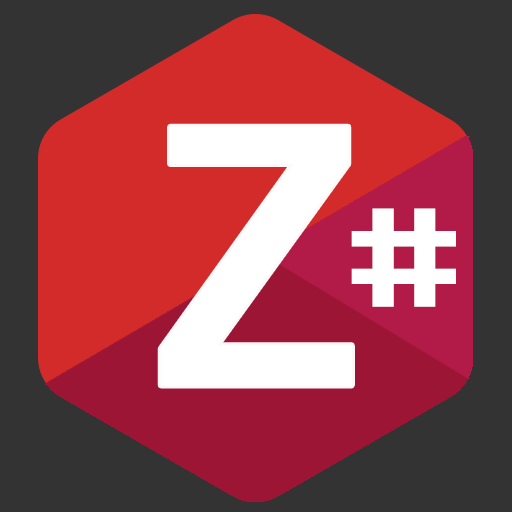
<style>
.page{position:relative;width:512px;height:512px;background:#333333}
.page>*{position:absolute;margin:0}
.t1{font:388px "FranklinGothic-Medium";color:#ffffff}
.t2{font:154.4px "BrickShapers";color:#ffffff;scale:1.38 1}
</style>
<div class="page">
<p class="t1" style="left:160px;top:126px;width:192px;height:260px">Z</p>
<p class="t2" style="left:351px;top:208px;width:105px;height:99px">#</p>
</div>
